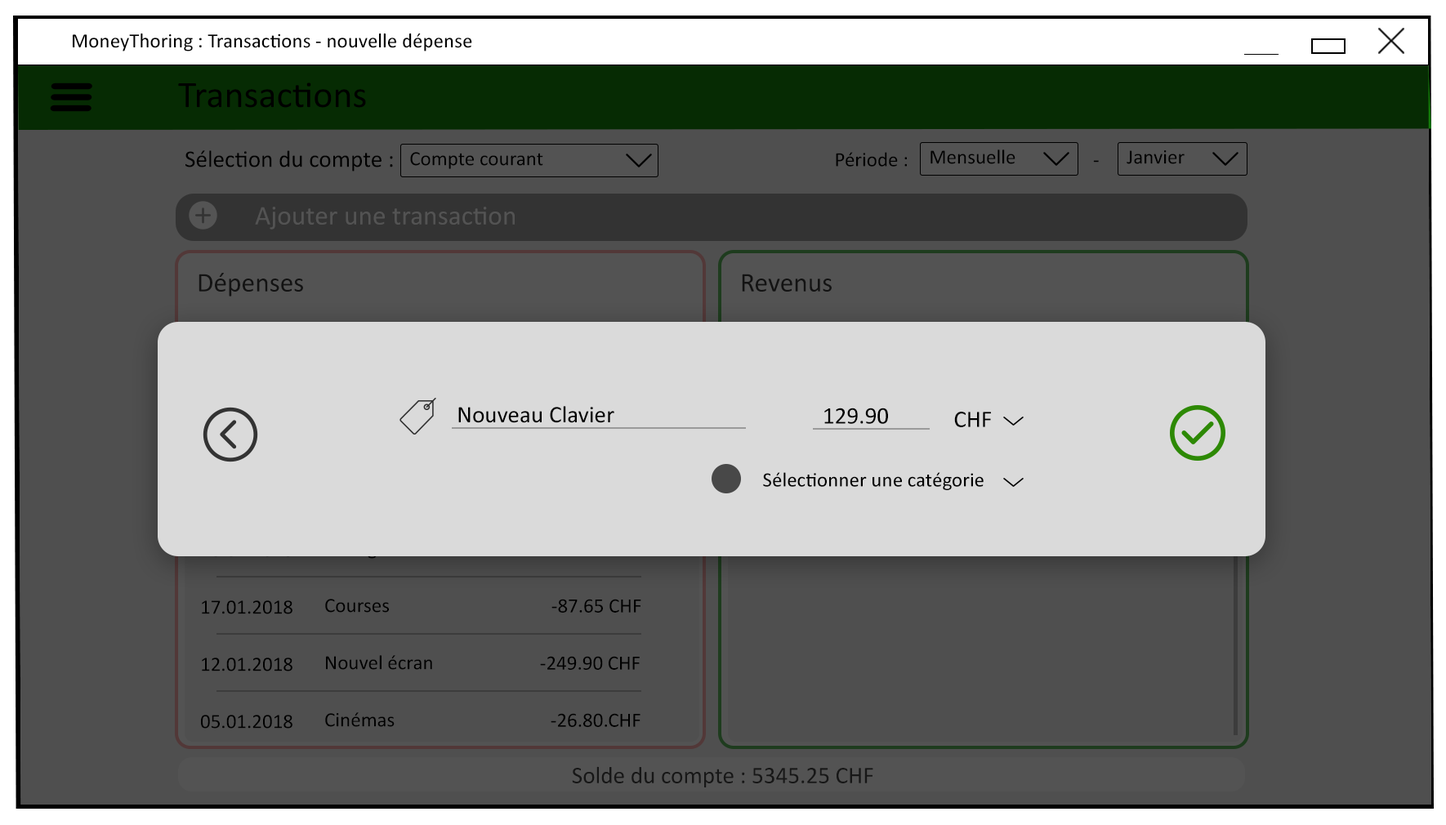
<style>
.page{position:relative;width:1446px;height:825px;background:#4f4f4f}
.page>*{position:absolute;margin:0}
.t1{font:20.4px "Calibri";color:#010101}
.t2{font:37.4px "Calibri";color:#000000}
.t3{font:20.4px "Calibri";color:#000000}
.t4{font:23.8px "Calibri";color:#000000}
.t5{font:27.2px "Calibri";color:#535353}
.t6{font:27.2px "Calibri";color:#131313}
.t7{font:23.8px "Calibri";color:#171717}
</style>
<div class="page">
<p class="t1" style="left:73px;top:33px;width:399px;height:18px">MoneyThoring : Transactions - nouvelle dépense</p>
<p class="t2" style="left:178px;top:82px;width:188px;height:26px">Transactions</p>
<p class="t3" style="left:930px;top:149px;width:85px;height:15px">Mensuelle</p>
<p class="t4" style="left:185px;top:150px;width:208px;height:22px">Sélection du compte :</p>
<p class="t3" style="left:410px;top:152px;width:133px;height:17px">Compte courant</p>
<p class="t3" style="left:835px;top:152px;width:263px;height:15px">Période :                                        -</p>
<p class="t3" style="left:1126px;top:150px;width:58px;height:14px">Janvier</p>
<p class="t5" style="left:255px;top:207px;width:260px;height:22px">Ajouter une transaction</p>
<p class="t6" style="left:198px;top:273px;width:105px;height:23px">Dépenses</p>
<p class="t6" style="left:742px;top:274px;width:89px;height:18px">Revenus</p>
<p class="t4" style="left:458px;top:406px;width:156px;height:17px">Nouveau Clavier</p>
<p class="t4" style="left:824px;top:408px;width:64px;height:16px">129.90</p>
<p class="t4" style="left:954px;top:412px;width:37px;height:15px">CHF</p>
<p class="t3" style="left:763px;top:472px;width:220px;height:18px">Sélectionner une catégorie</p>
<p class="t3" style="left:202px;top:600px;width:90px;height:14px">17.01.2018</p>
<p class="t3" style="left:325px;top:599px;width:64px;height:14px">Courses</p>
<p class="t3" style="left:551px;top:599px;width:90px;height:14px">-87.65 CHF</p>
<p class="t3" style="left:202px;top:657px;width:90px;height:14px">12.01.2018</p>
<p class="t3" style="left:326px;top:655px;width:106px;height:15px">Nouvel écran</p>
<p class="t3" style="left:540px;top:656px;width:99px;height:14px">-249.90 CHF</p>
<p class="t3" style="left:325px;top:712px;width:69px;height:15px">Cinémas</p>
<p class="t3" style="left:550px;top:713px;width:90px;height:14px">-26.80.CHF</p>
<p class="t3" style="left:201px;top:715px;width:91px;height:14px">05.01.2018</p>
<p class="t7" style="left:572px;top:766px;width:301px;height:21px">Solde du compte : 5345.25 CHF</p>
</div>
